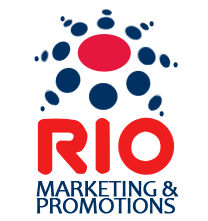
<style>
.page{position:relative;width:208px;height:221px;background:#ffffff}
.page>*{position:absolute;margin:0}
.t1{font:23.6px/16.8px "Candara";letter-spacing:-0.04em;color:#003163;text-transform:uppercase;font-weight:bold}
</style>
<div class="page">
<p class="t1" style="left:36px;top:181px;width:143px;height:33px">MARKETING &amp;<br>promotions</p>
</div>
